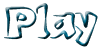
<style>
.page{position:relative;width:100px;height:50px;background:#ffffff}
.page>*{position:absolute;margin:0}
.t1{font:60px "bobotoh"}
</style>
<div class="page">
<p class="t1" style="left:4px;top:3px;width:94px;height:44px">Play</p>
</div>
